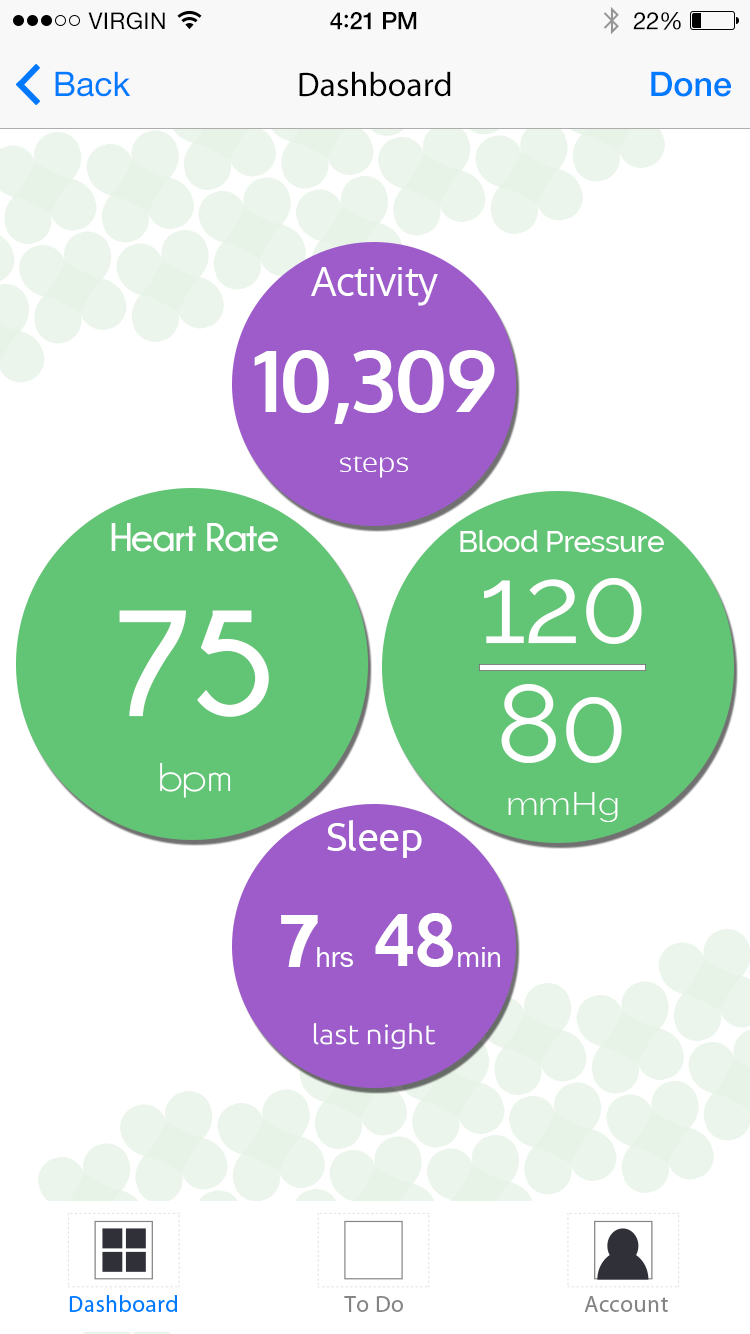
<style>
.page{position:relative;width:750px;height:1334px;background:#ffffff}
.page>*{position:absolute;margin:0}
.t1{font:23px "HelveticaNeue";letter-spacing:0.02em;color:#000000}
.t2{font:24px "HelveticaNeue-Medium";letter-spacing:-0.02em;color:#000000}
.t3{font:26px "Avenir-Medium";letter-spacing:-0.02em;color:#000000}
.t4{font:24px "HelveticaNeue";letter-spacing:-0.02em;color:#000000}
.t5{font:34px "HelveticaNeue";color:#007aff}
.t6{font:34px "MyriadPro-Regular";color:#000000}
.t7{font:34px "HelveticaNeue-Medium";color:#007aff}
.t8{font:40px "Oxygen-Regular";letter-spacing:-0.02em;color:#ffffff}
.t9{font:85px "Oxygen-Bold";letter-spacing:-0.02em;color:#ffffff}
.t10{font:27px "Oxygen-Light";color:#ffffff;scale:1.11 1}
.t11{font:40px "Champagne&Limousines-Bold";letter-spacing:-0.02em;color:#ffffff}
.t12{font:30px "Raleway-Medium";letter-spacing:-0.02em;color:#ffffff}
.t13{font:110px "Raleway";letter-spacing:-0.02em;color:#ffffff}
.t14{font:150px "Champagne&Limousines-Bold";letter-spacing:-0.02em;color:#ffffff}
.t15{font:40.5px "Champagne&Limousines";color:#ffffff;scale:1.11 1}
.t16{font:32.4px "Raleway-Light";color:#ffffff;scale:1.11 1}
.t17{font:40px "Ubuntu";letter-spacing:-0.02em;color:#ffffff}
.t18{font:75px "Ubuntu-Bold";letter-spacing:-0.02em;color:#ffffff}
.t19{font:75px "Ubuntu-Medium";letter-spacing:-0.02em;color:#ffffff}
.t20{font:30px "FranklinGothic-Book";letter-spacing:-0.02em;color:#ffffff}
.t21{font:27px "Ubuntu-Light";color:#ffffff;scale:1.11 1}
</style>
<div class="page">
<p class="t1" style="left:88px;top:12px;width:77px;height:18px">VIRGIN</p>
<p class="t2" style="left:330px;top:12px;width:87px;height:18px">4<span class="t3">:</span>21 PM</p>
<p class="t4" style="left:633px;top:12px;width:48px;height:18px">22%</p>
<p class="t5" style="left:55px;top:71px;width:76px;height:26px">Back</p>
<p class="t6" style="left:299px;top:71px;width:152px;height:26px">Dashboard</p>
<p class="t7" style="left:651px;top:71px;width:80px;height:26px">Done</p>
<p class="t8" style="left:311px;top:267px;width:127px;height:39px">Activity</p>
<p class="t9" style="left:254px;top:350px;width:241px;height:74px">10,309</p>
<p class="t10" style="left:340px;top:456px;width:68px;height:22px">steps</p>
<p class="t11" style="left:111px;top:523px;width:167px;height:29px">Heart Rate</p>
<p class="t12" style="left:460px;top:530px;width:204px;height:22px">Blood Pressure</p>
<p class="t13" style="left:484px;top:578px;width:158px;height:66px">120</p>
<p class="t14" style="left:119px;top:610px;width:150px;height:107px">75</p>
<p class="t13" style="left:501px;top:684px;width:121px;height:79px">80</p>
<p class="t15" style="left:160px;top:762px;width:71px;height:36px">bpm</p>
<p class="t16" style="left:508px;top:792px;width:110px;height:30px">mmHg</p>
<p class="t17" style="left:327px;top:820px;width:95px;height:38px">Sleep</p>
<p class="t18" style="left:281px;top:915px;width:37px;height:52px">7</p>
<p class="t19" style="left:375px;top:913px;width:78px;height:54px">48</p>
<p class="t20" style="left:317px;top:947px;width:36px;height:20px">hrs</p>
<p class="t20" style="left:458px;top:947px;width:42px;height:20px">min</p>
<p class="t21" style="left:313px;top:1023px;width:123px;height:27px">last night</p>
</div>
